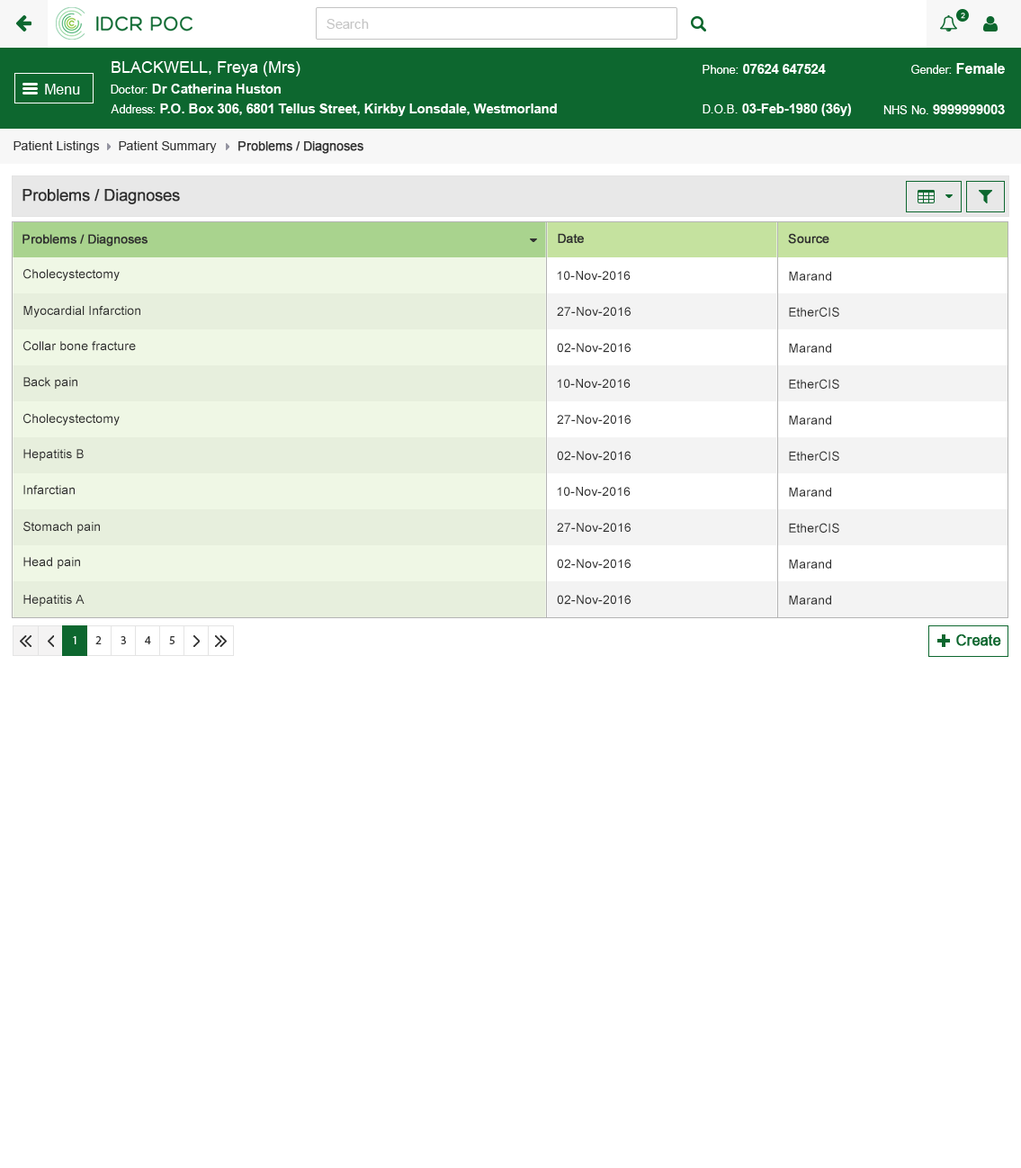
<style>
.page{position:relative;width:1021px;height:1168px;background:#ffffff}
.page>*{position:absolute;margin:0}
.t1{font:12.6px "ArialMT";color:#313131}
.t2{font:12.6px "ArialMT";color:#313131;font-weight:bold}
.t3{font:16.2px "ArialMT";color:#303030;font-weight:bold}
.t4{font:12.6px "ArialMT";color:#303030;font-weight:bold}
.t5{font:12.6px "ArialMT";color:#303030}
</style>
<div class="page">
<p class="t1" style="left:13px;top:140px;width:87px;height:13px">Patient Listings</p>
<p class="t1" style="left:119px;top:140px;width:98px;height:13px">Patient Summary</p>
<p class="t2" style="left:238px;top:141px;width:125px;height:13px">Problems / Diagnoses</p>
<p class="t3" style="left:22px;top:189px;width:158px;height:15px">Problems / Diagnoses</p>
<p class="t4" style="left:22px;top:234px;width:126px;height:13px">Problems / Diagnoses</p>
<p class="t4" style="left:558px;top:233px;width:26px;height:10px">Date</p>
<p class="t4" style="left:788px;top:233px;width:41px;height:11px">Source</p>
<p class="t5" style="left:23px;top:269px;width:97px;height:12px">Cholecystectomy</p>
<p class="t5" style="left:557px;top:271px;width:74px;height:9px">10-Nov-2016</p>
<p class="t5" style="left:789px;top:271px;width:42px;height:10px">Marand</p>
<p class="t5" style="left:23px;top:306px;width:117px;height:12px">Myocardial Infarction</p>
<p class="t5" style="left:557px;top:307px;width:74px;height:9px">27-Nov-2016</p>
<p class="t5" style="left:789px;top:307px;width:50px;height:10px">EtherCIS</p>
<p class="t5" style="left:23px;top:341px;width:113px;height:10px">Collar bone fracture</p>
<p class="t5" style="left:557px;top:343px;width:74px;height:10px">02-Nov-2016</p>
<p class="t5" style="left:789px;top:343px;width:42px;height:10px">Marand</p>
<p class="t5" style="left:23px;top:377px;width:54px;height:12px">Back pain</p>
<p class="t5" style="left:557px;top:379px;width:74px;height:9px">10-Nov-2016</p>
<p class="t5" style="left:789px;top:379px;width:50px;height:10px">EtherCIS</p>
<p class="t5" style="left:23px;top:413px;width:97px;height:13px">Cholecystectomy</p>
<p class="t5" style="left:557px;top:415px;width:74px;height:9px">27-Nov-2016</p>
<p class="t5" style="left:789px;top:415px;width:42px;height:10px">Marand</p>
<p class="t5" style="left:23px;top:449px;width:61px;height:12px">Hepatitis B</p>
<p class="t5" style="left:557px;top:451px;width:74px;height:10px">02-Nov-2016</p>
<p class="t5" style="left:789px;top:451px;width:50px;height:10px">EtherCIS</p>
<p class="t5" style="left:23px;top:485px;width:52px;height:10px">Infarctian</p>
<p class="t5" style="left:557px;top:487px;width:74px;height:9px">10-Nov-2016</p>
<p class="t5" style="left:789px;top:487px;width:42px;height:10px">Marand</p>
<p class="t5" style="left:23px;top:521px;width:77px;height:13px">Stomach pain</p>
<p class="t5" style="left:557px;top:523px;width:74px;height:9px">27-Nov-2016</p>
<p class="t5" style="left:789px;top:523px;width:50px;height:10px">EtherCIS</p>
<p class="t5" style="left:23px;top:557px;width:57px;height:12px">Head pain</p>
<p class="t5" style="left:557px;top:559px;width:74px;height:10px">02-Nov-2016</p>
<p class="t5" style="left:789px;top:559px;width:42px;height:10px">Marand</p>
<p class="t5" style="left:23px;top:595px;width:62px;height:11px">Hepatitis A</p>
<p class="t5" style="left:557px;top:595px;width:74px;height:10px">02-Nov-2016</p>
<p class="t5" style="left:789px;top:595px;width:42px;height:10px">Marand</p>
</div>
